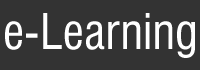
<style>
.page{position:relative;width:200px;height:70px;background:#333333}
.page>*{position:absolute;margin:0}
.t1{font:48px "Swiss721BT-RomanCondensed";color:#ffffff}
</style>
<div class="page">
<p class="t1" style="left:5px;top:13px;width:190px;height:45px">e-Learning</p>
</div>
